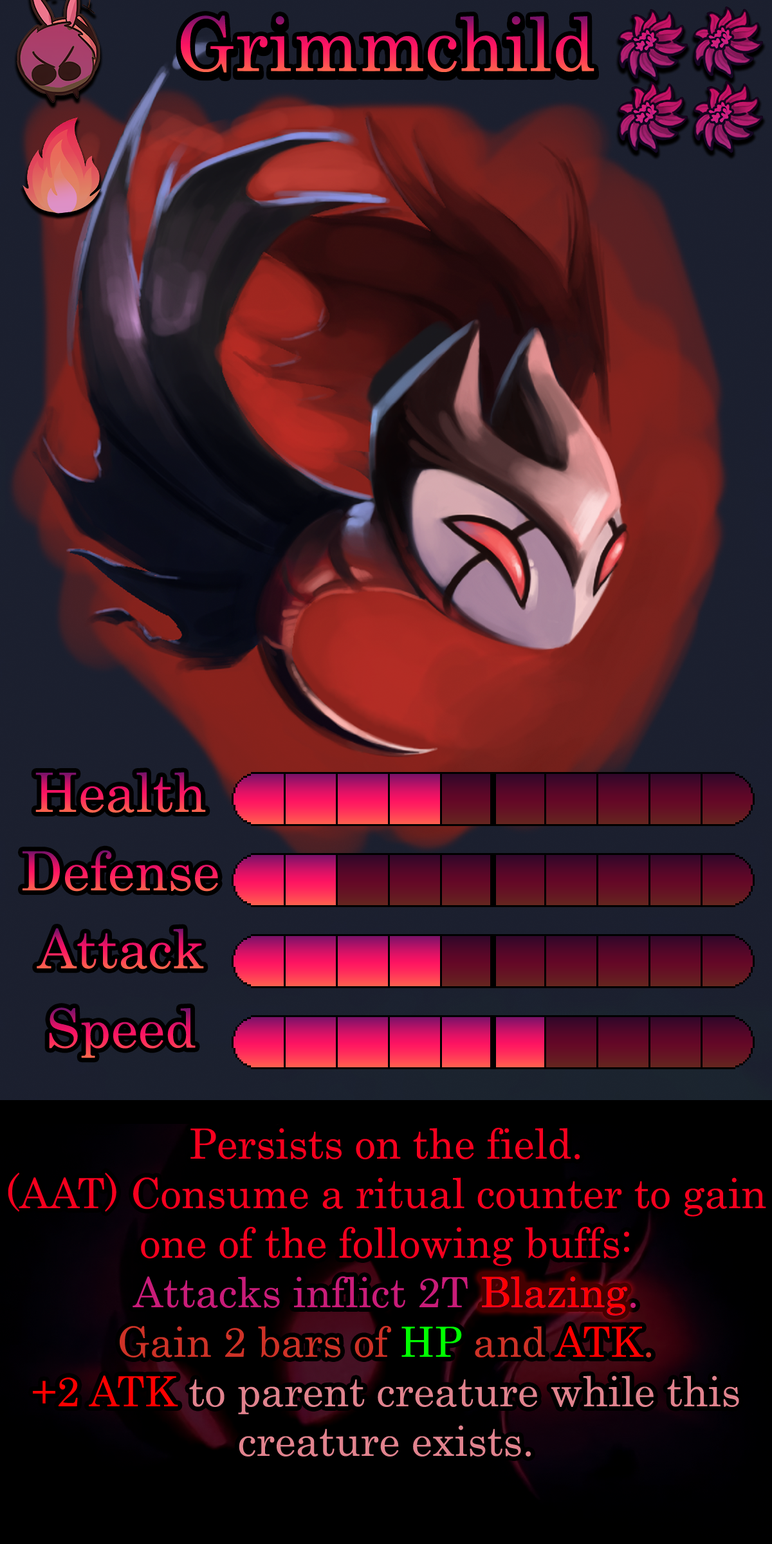
<style>
.page{position:relative;width:772px;height:1544px}
.page>*{position:absolute;margin:0}
.t1{font:128.7px "Century"}
.t2{font:92.7px "Century"}
.t3{font:71.4px/49.5px "Century";color:#f7001e}
.t4{font:71.4px/49.5px "Century";color:#c91c79}
.t5{font:71.4px/49.5px "Century";color:#ce3227}
.t6{font:71.4px/49.5px "Century";color:#00ff00}
.t7{font:71.4px/49.5px "Century";color:#ff0000}
.t8{font:71.4px/49.5px "Century";color:#e1838e}
.t9{font:71.4px "Century";color:#ff0000}
</style>
<div class="page">
<p class="t1" style="left:181px;top:15px;width:414px;height:58px">Grimmchild</p>
<p class="t2" style="left:35px;top:772px;width:171px;height:41px">Health</p>
<p class="t2" style="left:23px;top:850px;width:195px;height:42px">Defense</p>
<p class="t2" style="left:37px;top:929px;width:167px;height:41px">Attack</p>
<p class="t2" style="left:49px;top:1008px;width:147px;height:50px">Speed</p>
<p class="t3" style="left:8px;top:1128px;width:758px;height:329px;text-align:center">Persists on the field.<br>(AAT) Consume a ritual counter to gain one of the following buffs:<br><span class="t4">Attacks inflict 2T Blazing.<br></span><span class="t5">Gain 2 bars of </span><span class="t6">HP</span><span class="t5"> and </span><span class="t7">ATK</span><span class="t5">.<br></span><span class="t7">+2 ATK</span><span class="t8"> to parent creature while this creature exists.</span></p>
<p class="t9" style="left:482px;top:1277px;width:146px;height:39px">Blazing</p>
</div>
